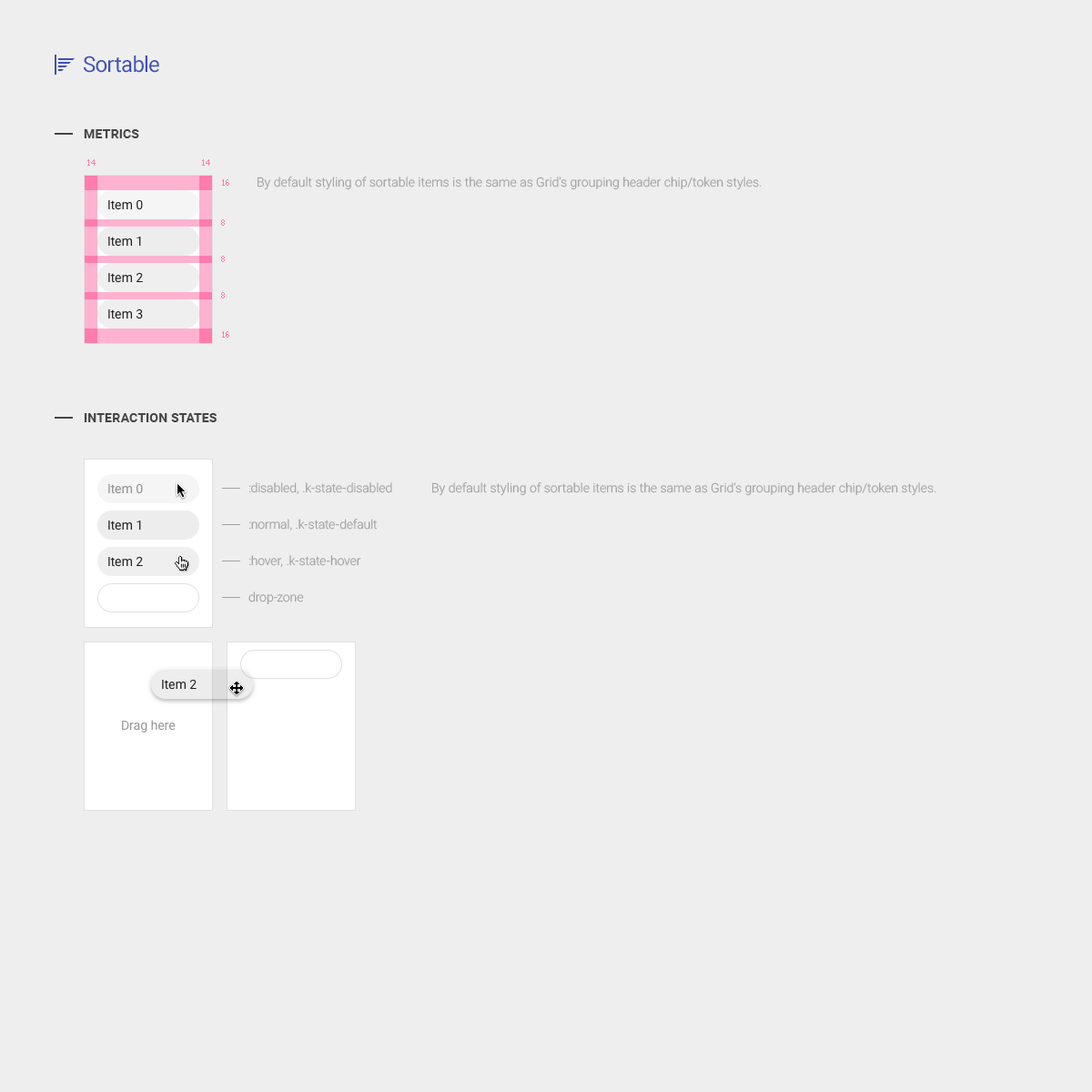
<style>
.page{position:relative;width:1092px;height:1092px;background:#eeeeee}
.page>*{position:absolute;margin:0}
.t1{font:21.8px "Roboto-Regular";letter-spacing:-0.025em;color:#3f51b5}
.t2{font:12.7px "Roboto-Bold";letter-spacing:0.01em;color:#454545;text-transform:uppercase}
.t3{font:8.2px "Tahoma";color:#ff7cae}
.t4{font:12.7px "Roboto-Light";color:#a1a1a1}
.t5{font:12.7px "Roboto-Regular";color:#202020}
.t6{font:12.7px "Roboto-Regular";color:#1f1f1f}
.t7{font:12.7px "Roboto-Regular";color:#8e8e8e}
.t8{font:12.7px/36.4px "Roboto-Light";color:#a1a1a1}
.t9{font:12.7px "Roboto-Regular";color:#949494}
</style>
<div class="page">
<p class="t1" style="left:84px;top:56px;width:75px;height:17px">Sortable</p>
<p class="t2" style="left:84px;top:129px;width:55px;height:9px">Metrics</p>
<p class="t3" style="left:87px;top:159px;width:9px;height:7px">14</p>
<p class="t3" style="left:202px;top:159px;width:8px;height:7px">14</p>
<p class="t3" style="left:222px;top:179px;width:7px;height:7px">16</p>
<p class="t4" style="left:258px;top:177px;width:504px;height:13px">By default styling of sortable items is the same as Grid’s grouping header chip/token styles.</p>
<p class="t5" style="left:108px;top:199px;width:35px;height:11px">Item 0</p>
<p class="t3" style="left:221px;top:219px;width:4px;height:7px">8</p>
<p class="t6" style="left:108px;top:237px;width:33px;height:10px">Item 1</p>
<p class="t3" style="left:221px;top:256px;width:4px;height:6px">8</p>
<p class="t6" style="left:108px;top:272px;width:35px;height:11px">Item 2</p>
<p class="t3" style="left:221px;top:292px;width:4px;height:6px">8</p>
<p class="t6" style="left:108px;top:308px;width:35px;height:11px">Item 3</p>
<p class="t3" style="left:222px;top:331px;width:7px;height:7px">16</p>
<p class="t2" style="left:84px;top:413px;width:133px;height:9px">Interaction states</p>
<p class="t7" style="left:108px;top:483px;width:35px;height:11px">Item 0</p>
<p class="t8" style="left:248px;top:482px;width:144px;height:122px">:disabled, .k-state-disabled<br>:normal, .k-state-default<br>:hover, .k-state-hover<br>drop-zone</p>
<p class="t4" style="left:432px;top:482px;width:504px;height:14px">By default styling of sortable items is the same as Grid’s grouping header chip/token styles.</p>
<p class="t6" style="left:108px;top:521px;width:33px;height:10px">Item 1</p>
<p class="t6" style="left:108px;top:556px;width:35px;height:11px">Item 2</p>
<p class="t6" style="left:162px;top:679px;width:35px;height:11px">Item 2</p>
<p class="t9" style="left:122px;top:720px;width:54px;height:13px">Drag here</p>
</div>
